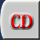
<style>
.page{position:relative;width:40px;height:40px;background:#c8c8c8}
.page>*{position:absolute;margin:0}
.t1{font:18px "MyungjoXB-HM"}
</style>
<div class="page">
<p class="t1" style="left:10px;top:14px;width:22px;height:14px">CD</p>
</div>
